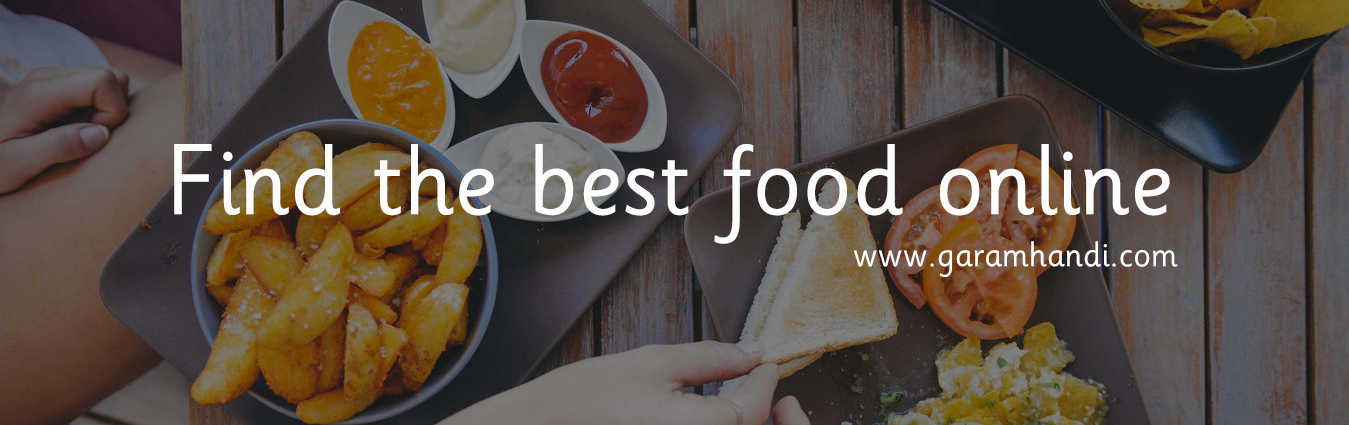
<style>
.page{position:relative;width:1349px;height:425px}
.page>*{position:absolute;margin:0}
.t1{font:100.3px "SassoonInfantStd";color:#fdfdfd}
.t2{font:36px "SassoonInfantStd";color:#fdfdfd}
</style>
<div class="page">
<p class="t1" style="left:174px;top:144px;width:996px;height:100px">Find the best food online</p>
<p class="t2" style="left:853px;top:241px;width:325px;height:36px">www.garamhandi.com</p>
</div>
